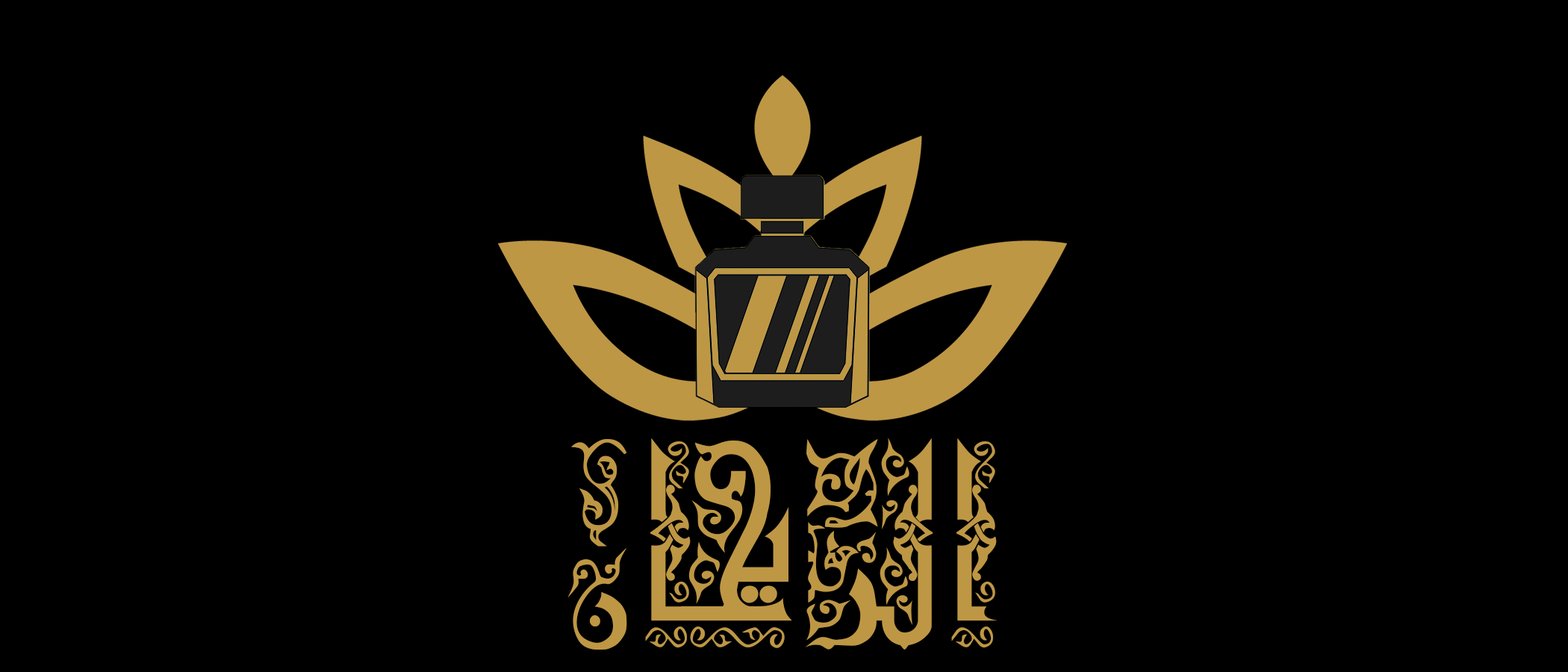
<style>
.page{position:relative;width:1568px;height:672px;background:#000000}
.page>*{position:absolute;margin:0}
.t1{font:226.7px "MCS-Hijaz-S_U-adorn.";letter-spacing:0.025em;color:#be9745}
</style>
<div class="page">
<p class="t1" style="left:567px;top:438px;width:430px;height:212px">الريحان</p>
</div>
